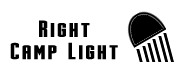
<style>
.page{position:relative;width:180px;height:78px;background:#ffffff}
.page>*{position:absolute;margin:0}
.t1{font:24px "Stark";letter-spacing:0.05em;color:#000000}
</style>
<div class="page">
<p class="t1" style="left:39px;top:20px;width:51px;height:17px">Right</p>
<p class="t1" style="left:10px;top:42px;width:108px;height:18px">Camp Light</p>
</div>
